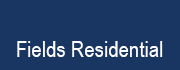
<style>
.page{position:relative;width:180px;height:70px;background:#193562}
.page>*{position:absolute;margin:0}
.t1{font:22.5px "ArialNarrow";letter-spacing:0.005em;color:#ffffff}
</style>
<div class="page">
<p class="t1" style="left:17px;top:41px;width:146px;height:16px">Fields Residential</p>
</div>
